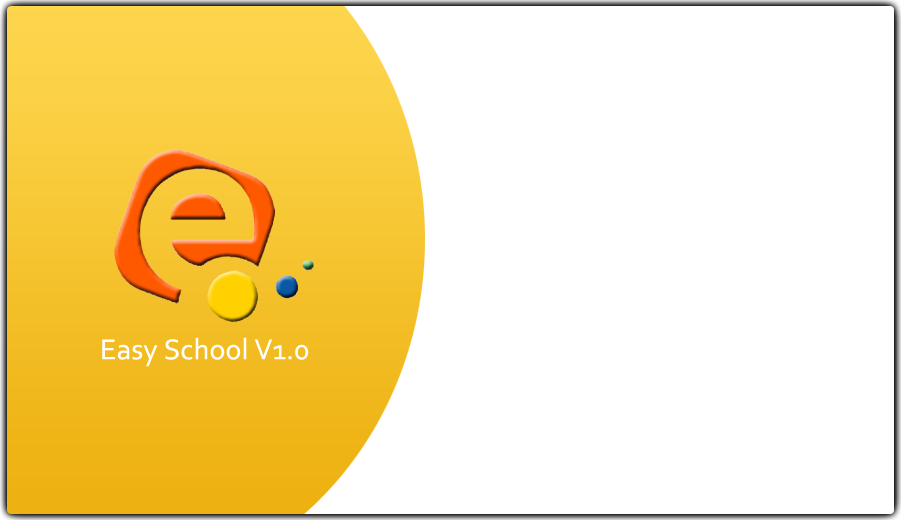
<style>
.page{position:relative;width:901px;height:520px;background:#ffffff}
.page>*{position:absolute;margin:0}
.t1{font:30px "Corbel";color:#fffefe}
</style>
<div class="page">
<p class="t1" style="left:102px;top:337px;width:207px;height:30px">Easy School V1.0</p>
</div>
